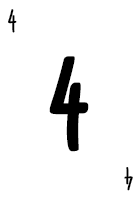
<style>
.page{position:relative;width:140px;height:200px;background:#ffffff}
.page>*{position:absolute;margin:0}
.t1{font:28.7px "CardenioModern-Reg";letter-spacing:-0.1em;color:#000000;text-transform:uppercase;font-weight:bold;scale:0.87 1}
.t2{font:115px "CardenioModern-Bold";letter-spacing:-0.1em;color:#000000;text-transform:uppercase;font-weight:bold;scale:0.87 1}
</style>
<div class="page">
<p class="t1" style="left:8px;top:9px;width:9px;height:24px">4</p>
<p class="t2" style="left:49px;top:56px;width:40px;height:96px">4</p>
<p class="t1" style="left:124px;top:167px;width:9px;height:24px;rotate:180deg">4</p>
</div>
